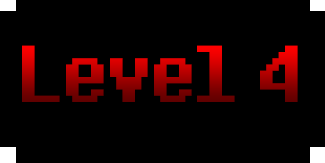
<style>
.page{position:relative;width:325px;height:163px;background:#000000}
.page>*{position:absolute;margin:0}
.t1{font:100px "8bitoperator-JVE"}
</style>
<div class="page">
<p class="t1" style="left:22px;top:45px;width:276px;height:57px">Level 4</p>
</div>
